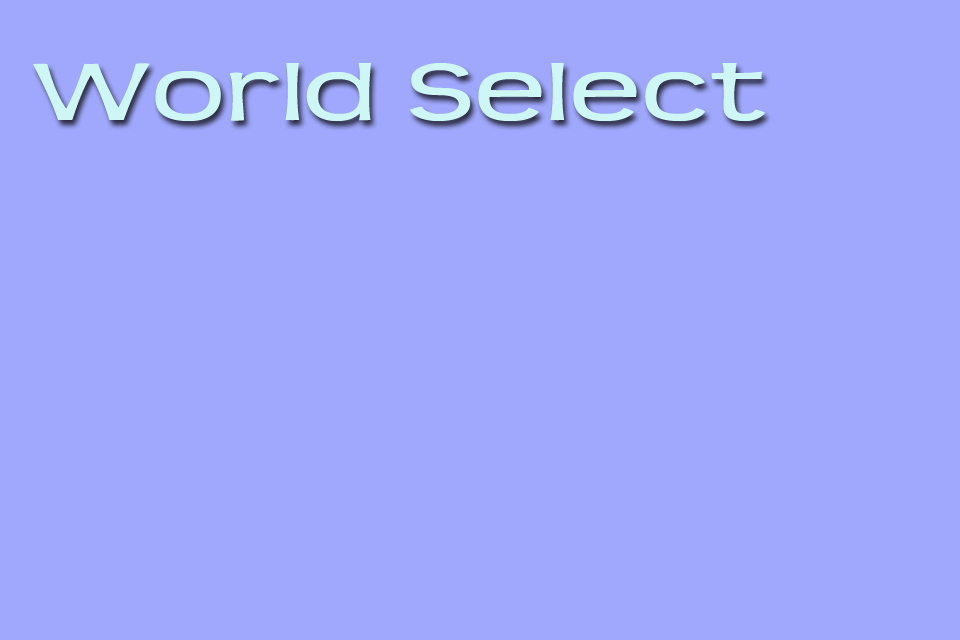
<style>
.page{position:relative;width:960px;height:640px;background:#9fa8fc}
.page>*{position:absolute;margin:0}
.t1{font:89.6px "Teen";color:#cdf6f5;scale:1.43 1}
</style>
<div class="page">
<p class="t1" style="left:33px;top:63px;width:732px;height:58px">World Select</p>
</div>
